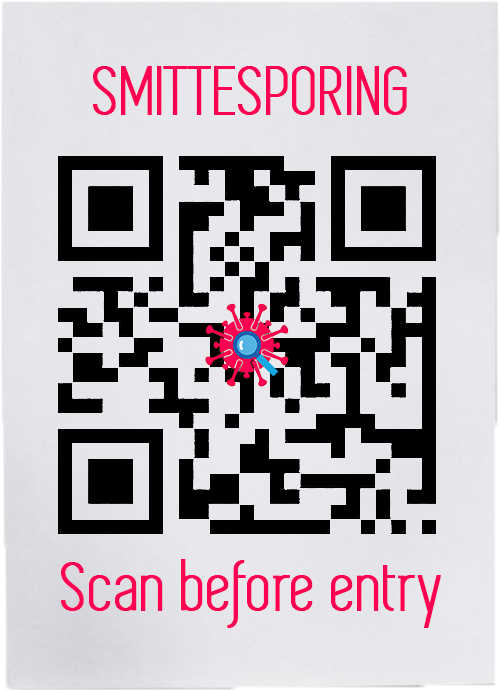
<style>
.page{position:relative;width:500px;height:690px}
.page>*{position:absolute;margin:0}
.t1{font:72px "Simplifica";color:#ff0053;font-weight:bold}
</style>
<div class="page">
<p class="t1" style="left:93px;top:66px;width:314px;height:49px">SMITTESPORING</p>
<p class="t1" style="left:61px;top:559px;width:380px;height:69px">Scan before entry</p>
</div>
